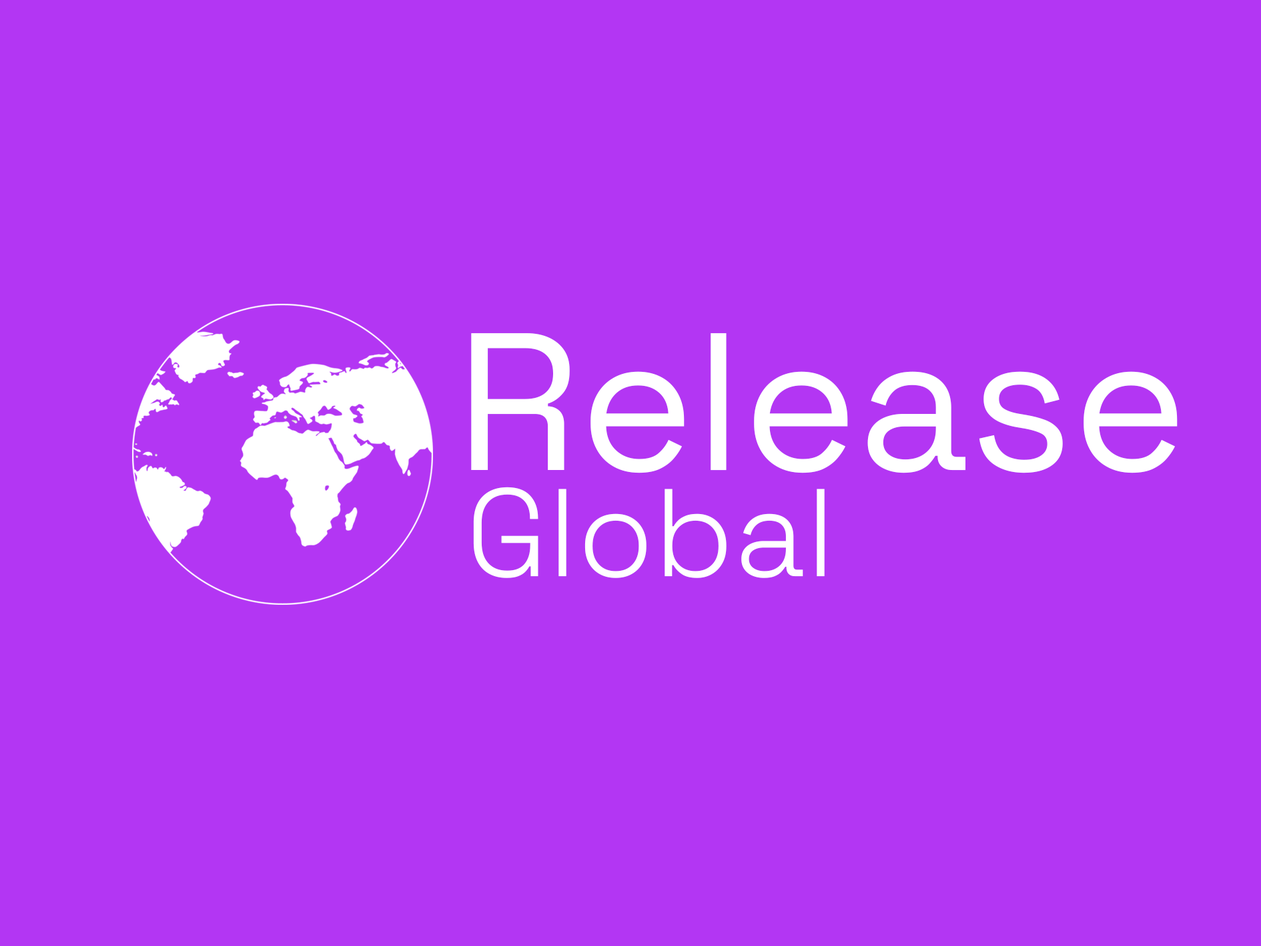
<style>
.page{position:relative;width:1261px;height:946px;background:#b336f3}
.page>*{position:absolute;margin:0}
.t1{font:195.3px "SpaceGrotesk-Regular";color:#ffffff}
.t2{font:124.4px "SpaceGrotesk-Light";color:#ffffff}
</style>
<div class="page">
<p class="t1" style="left:471px;top:333px;width:707px;height:140px">Release</p>
<p class="t2" style="left:473px;top:486px;width:352px;height:92px">Global</p>
</div>
